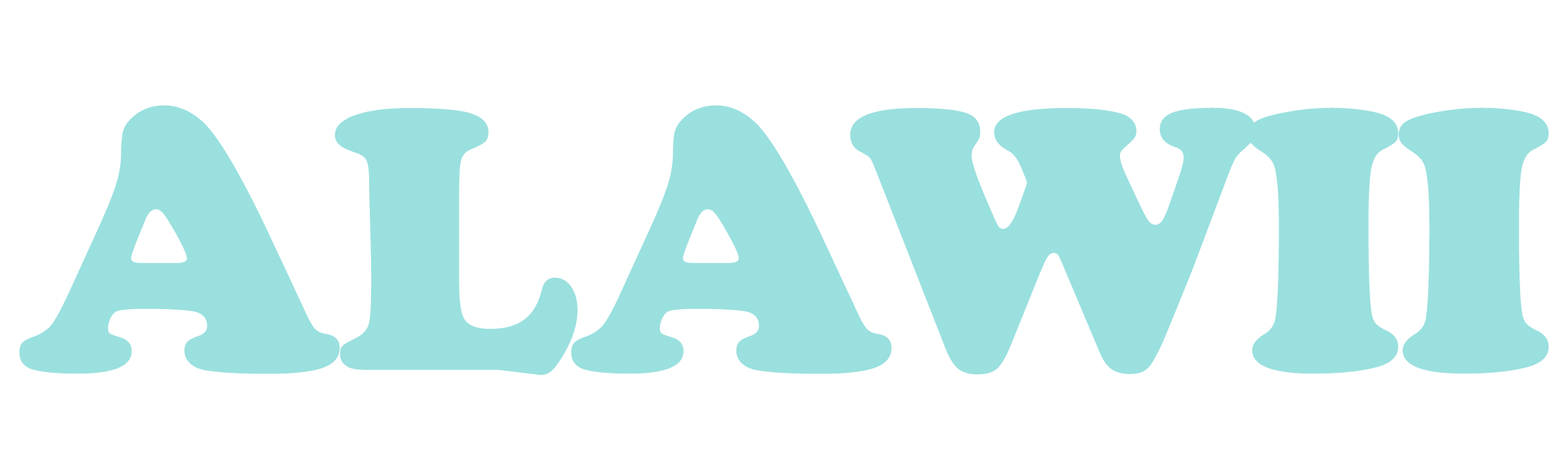
<style>
.page{position:relative;width:1568px;height:451px;background:#ffffff}
.page>*{position:absolute;margin:0}
.t1{font:387.2px "CooperBlack";letter-spacing:-0.025em;color:#9ae0df}
</style>
<div class="page">
<p class="t1" style="left:19px;top:106px;width:1530px;height:270px">ALAWII</p>
</div>
